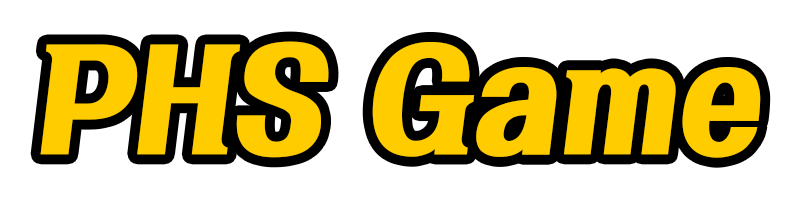
<style>
.page{position:relative;width:800px;height:200px;background:#ffffff}
.page>*{position:absolute;margin:0}
.t1{font:125px "KoreanTIMS-R";color:#ffcc00}
</style>
<div class="page">
<p class="t1" style="left:40px;top:41px;width:721px;height:117px">PHS Game</p>
</div>
